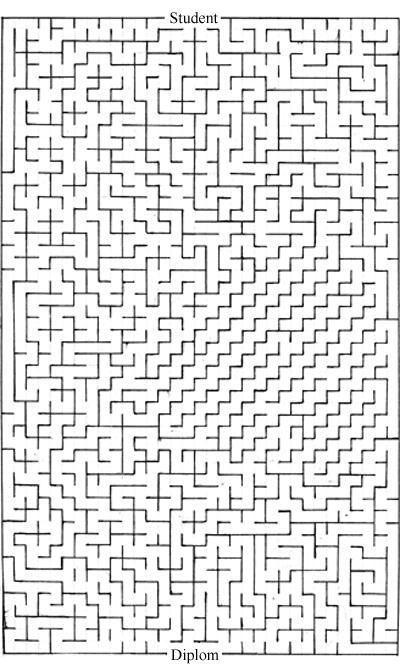
<style>
.page{position:relative;width:400px;height:671px;background:#ffffff}
.page>*{position:absolute;margin:0}
.t1{font:15.9px "TimesNewRomanPSMT";color:#000000}
</style>
<div class="page">
<p class="t1" style="left:170px;top:12px;width:48px;height:12px">Student</p>
<p class="t1" style="left:171px;top:649px;width:48px;height:15px">Diplom</p>
</div>
